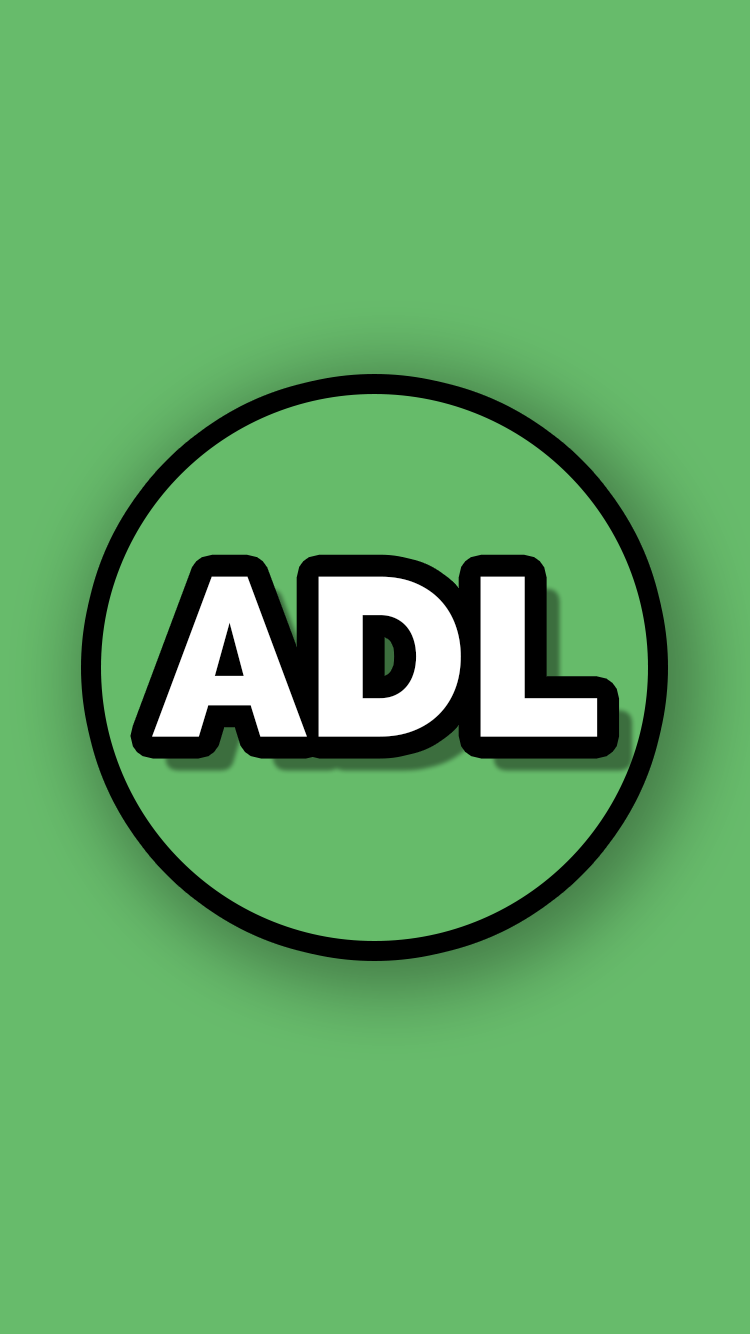
<style>
.page{position:relative;width:750px;height:1334px;background:#67bb6b}
.page>*{position:absolute;margin:0}
.t1{font:225.1px "Raleway-Heavy";color:#ffffff}
</style>
<div class="page">
<p class="t1" style="left:152px;top:576px;width:446px;height:161px">ADL</p>
</div>
